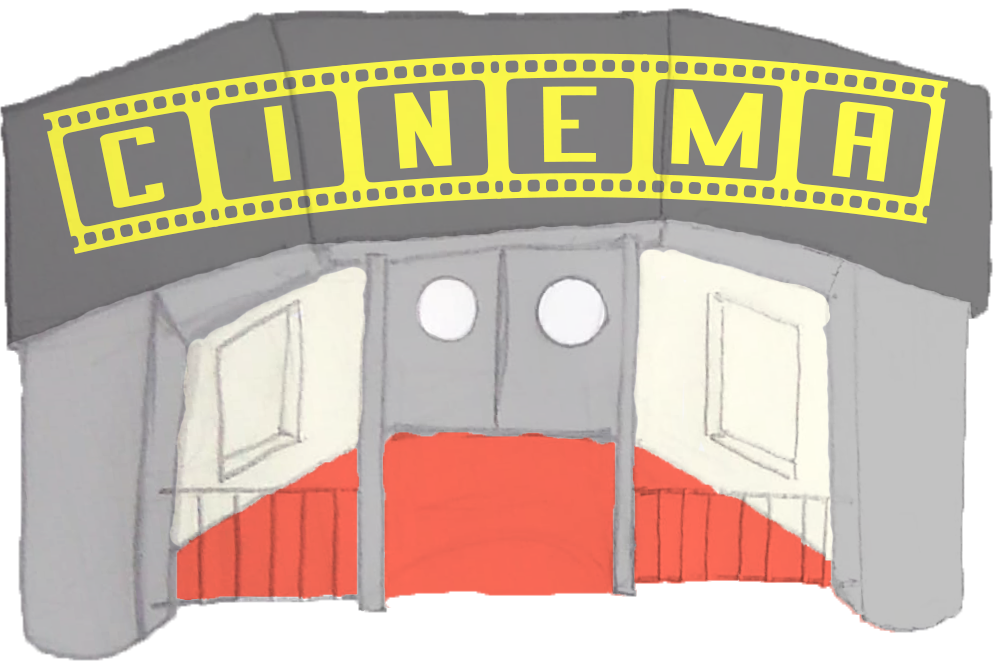
<style>
.page{position:relative;width:993px;height:661px}
.page>*{position:absolute;margin:0}
.t1{font:170px "CinemaSt";letter-spacing:-0.02em;color:#fffd4b}
</style>
<div class="page">
<p class="t1" style="left:43px;top:53px;width:906px;height:201px;rotate:-2deg">ciNEma</p>
</div>
